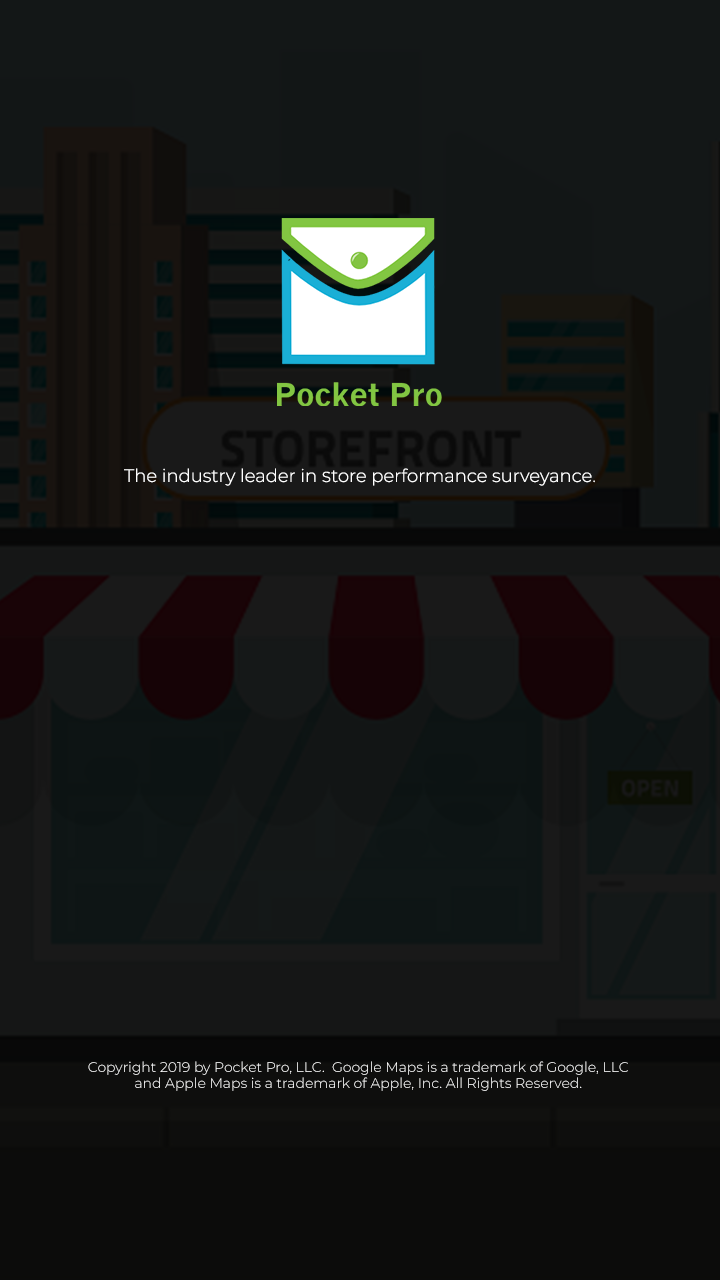
<style>
.page{position:relative;width:720px;height:1280px}
.page>*{position:absolute;margin:0}
.t1{font:18px "Montserrat-Light";color:#ffffff}
.t2{font:14px "Montserrat-Light";color:#ffffff}
</style>
<div class="page">
<p class="t1" style="left:124px;top:468px;width:471px;height:18px">The industry leader in Store performance surveyance.</p>
<p class="t2" style="left:88px;top:1061px;width:540px;height:30px;text-align:center">Copyright 2019 by Pocket Pro, LLC.  Google Maps is a trademark of Google, LLC <br>and Apple Maps is a trademark of Apple, Inc. All Rights Reserved.</p>
</div>
